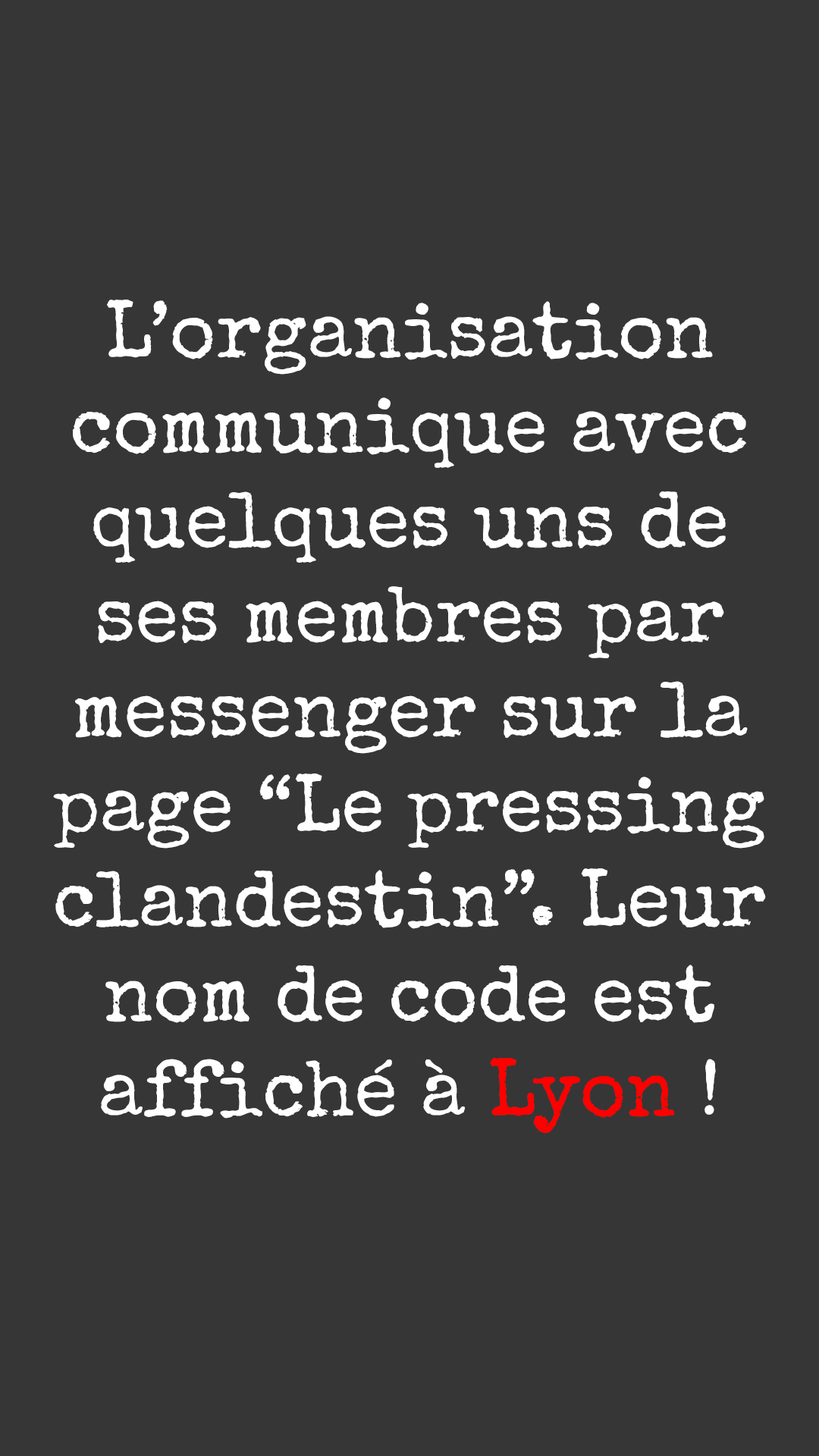
<style>
.page{position:relative;width:819px;height:1456px;background:#363636}
.page>*{position:absolute;margin:0}
.t1{font:79px "SpecialElite-Regular";color:#ffffff}
.t2{font:79px "SpecialElite-Regular";color:#ff0000}
</style>
<div class="page">
<p class="t1" style="left:53px;top:300px;width:713px;height:833px;text-align:center">L’organisation communique avec quelques uns de ses membres par messenger sur la page “Le pressing clandestin”. Leur nom de code est affiché à<span class="t2"> Lyon</span> !</p>
</div>
